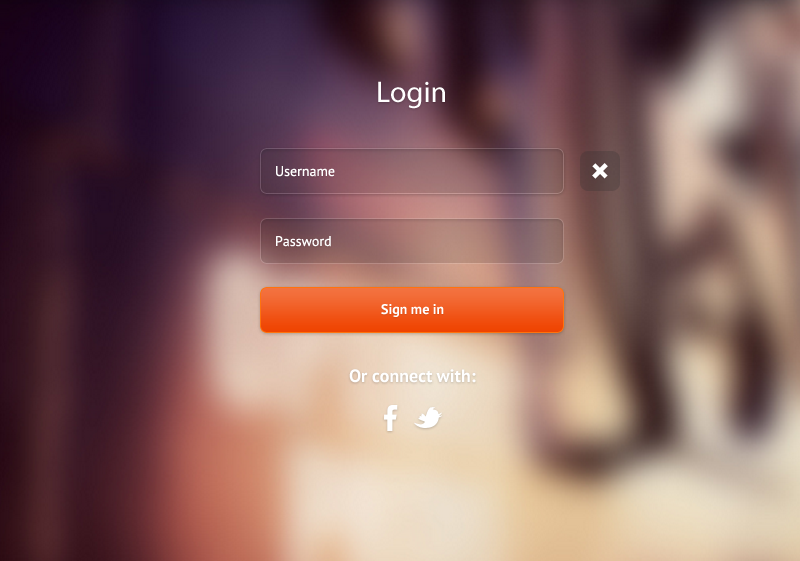
<style>
.page{position:relative;width:800px;height:561px}
.page>*{position:absolute;margin:0}
.t1{font:30px "MyriadPro-Regular";color:#ffffff}
.t2{font:14px "PTSans-Regular";color:#ffffff}
.t3{font:40px "PTSans-Bold";color:#ffffff}
.t4{font:14px "PTSans-Bold";color:#ffffff}
.t5{font:18px "PTSans-Bold";color:#ffffff}
</style>
<div class="page">
<p class="t1" style="left:378px;top:81px;width:67px;height:28px">Login</p>
<p class="t2" style="left:276px;top:166px;width:59px;height:11px">Username</p>
<p class="t3" style="left:592px;top:163px;width:16px;height:16px;rotate:45deg">+</p>
<p class="t2" style="left:276px;top:236px;width:55px;height:11px">Password</p>
<p class="t4" style="left:381px;top:304px;width:63px;height:13px">Sign me in</p>
<p class="t5" style="left:349px;top:369px;width:127px;height:14px">Or connect with:</p>
</div>
